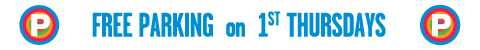
<style>
.page{position:relative;width:480px;height:50px;background:#ffffff}
.page>*{position:absolute;margin:0}
.t1{font:34px "GarageGothicBold";letter-spacing:-0.02em;color:#008fd5;text-transform:uppercase}
.t2{font:30px "GarageGothicBold";letter-spacing:-0.02em;color:#008fd5}
</style>
<div class="page">
<p class="t1" style="left:92px;top:11px;width:294px;height:26px">Free Parking  <span class="t2">on </span> 1st thursdays</p>
</div>
